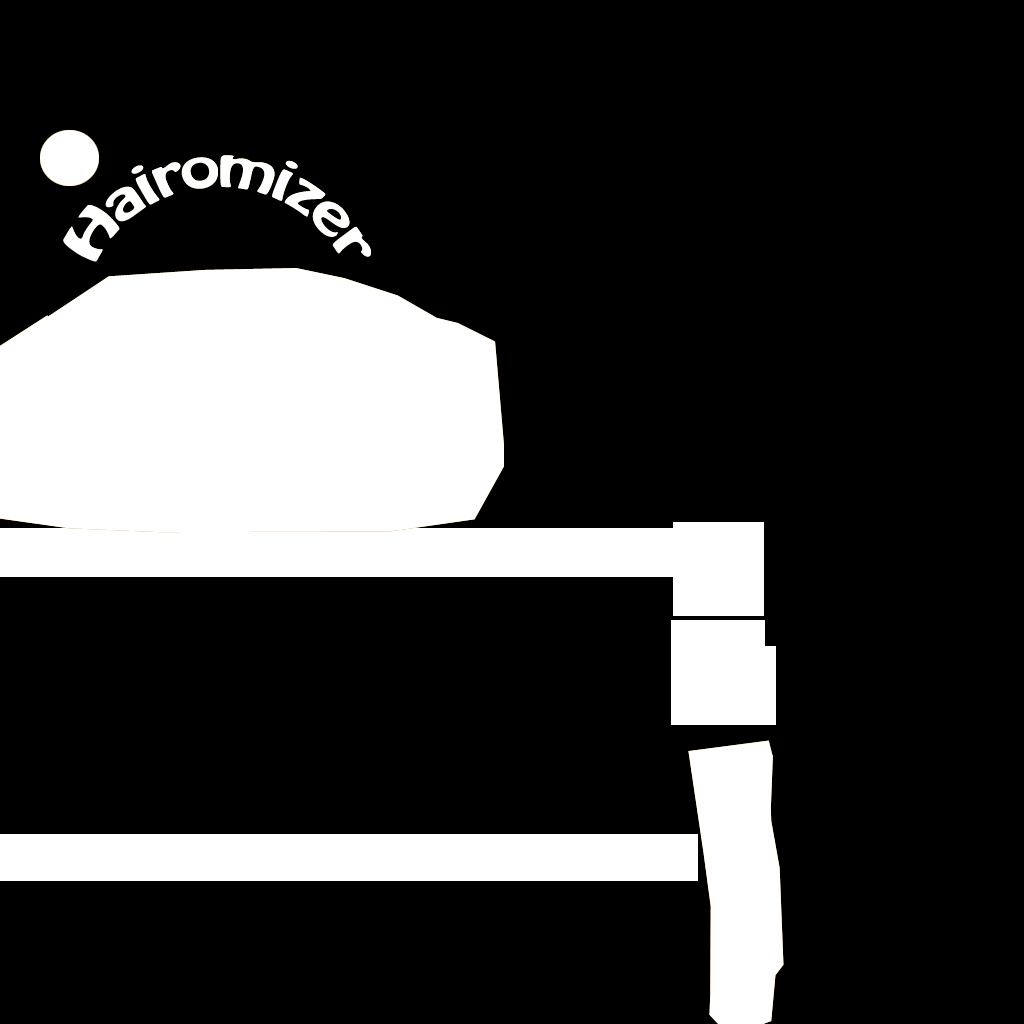
<style>
.page{position:relative;width:1024px;height:1024px;background:#000000}
.page>*{position:absolute;margin:0}
.t1{font:47.1px/78.4px "HoboStd";letter-spacing:-0.025em;color:#ffffff}
</style>
<div class="page">
<p class="t1" style="left:63px;top:155px;width:308px;height:107px">Hairomizer</p>
</div>
